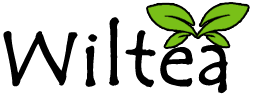
<style>
.page{position:relative;width:253px;height:94px;background:#ffffff}
.page>*{position:absolute;margin:0}
.t1{font:78px "TempusSansITC";letter-spacing:0.02em;color:#000000;font-weight:bold}
</style>
<div class="page">
<p class="t1" style="left:3px;top:17px;width:225px;height:77px">Wiltea</p>
</div>
